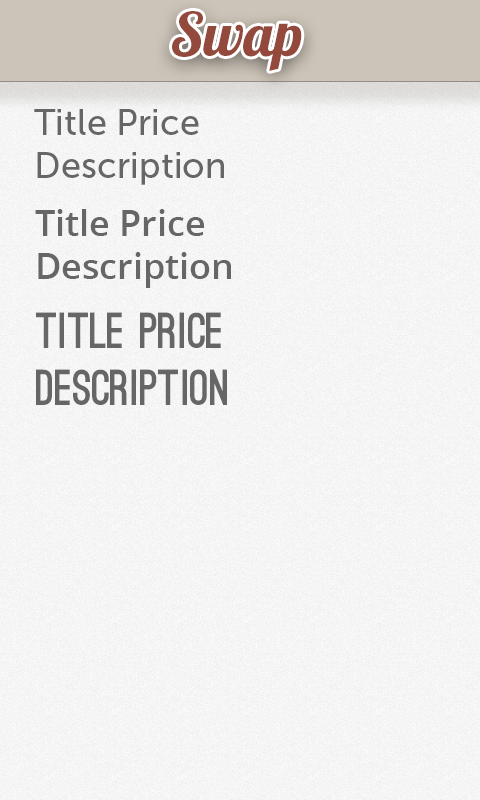
<style>
.page{position:relative;width:480px;height:800px}
.page>*{position:absolute;margin:0}
.t1{font:60px "Lobster1.4";color:#94493d}
.t2{font:36px "MuseoSans-500";color:#666666}
.t3{font:36px "OpenSans-Semibold";color:#666666}
.t4{font:48px "OstrichSans-Black";color:#666666}
</style>
<div class="page">
<p class="t1" style="left:172px;top:11px;width:130px;height:60px">Swap</p>
<p class="t2" style="left:34px;top:109px;width:190px;height:76px">Title Price<br>Description</p>
<p class="t3" style="left:35px;top:209px;width:196px;height:79px">Title Price<br>Description</p>
<p class="t4" style="left:36px;top:312px;width:191px;height:93px">Title Price<br>description</p>
</div>
